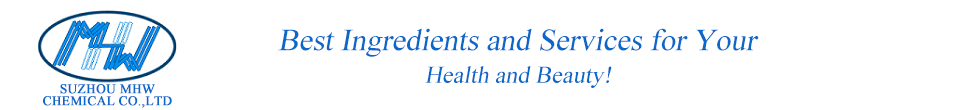
<style>
.page{position:relative;width:970px;height:110px;background:#ffffff}
.page>*{position:absolute;margin:0}
.t1{font:30.7px "TimesNewRomanPSMT";color:#0a68ca;font-style:italic}
.t2{font:24px "TimesNewRomanPSMT";color:#0a68ca;font-style:italic}
.t3{font:13.3px/12px "TimesNewRomanPSMT";color:#0a68ca;font-weight:bold}
</style>
<div class="page">
<p class="t1" style="left:278px;top:28px;width:481px;height:29px">Best Ingredients and Services for Your</p>
<p class="t2" style="left:425px;top:66px;width:187px;height:22px">Health and Beauty!</p>
<p class="t3" style="left:43px;top:84px;width:129px;height:24px;text-align:center">SUZHOU MHW <br>CHEMICAL CO.,LTD</p>
</div>
